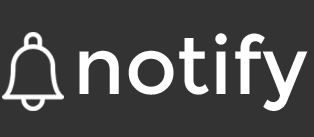
<style>
.page{position:relative;width:314px;height:137px;background:#333333}
.page>*{position:absolute;margin:0}
.t1{font:80px "Montserrat-Regular";color:#ffffff}
</style>
<div class="page">
<p class="t1" style="left:79px;top:33px;width:229px;height:78px">notify</p>
</div>
